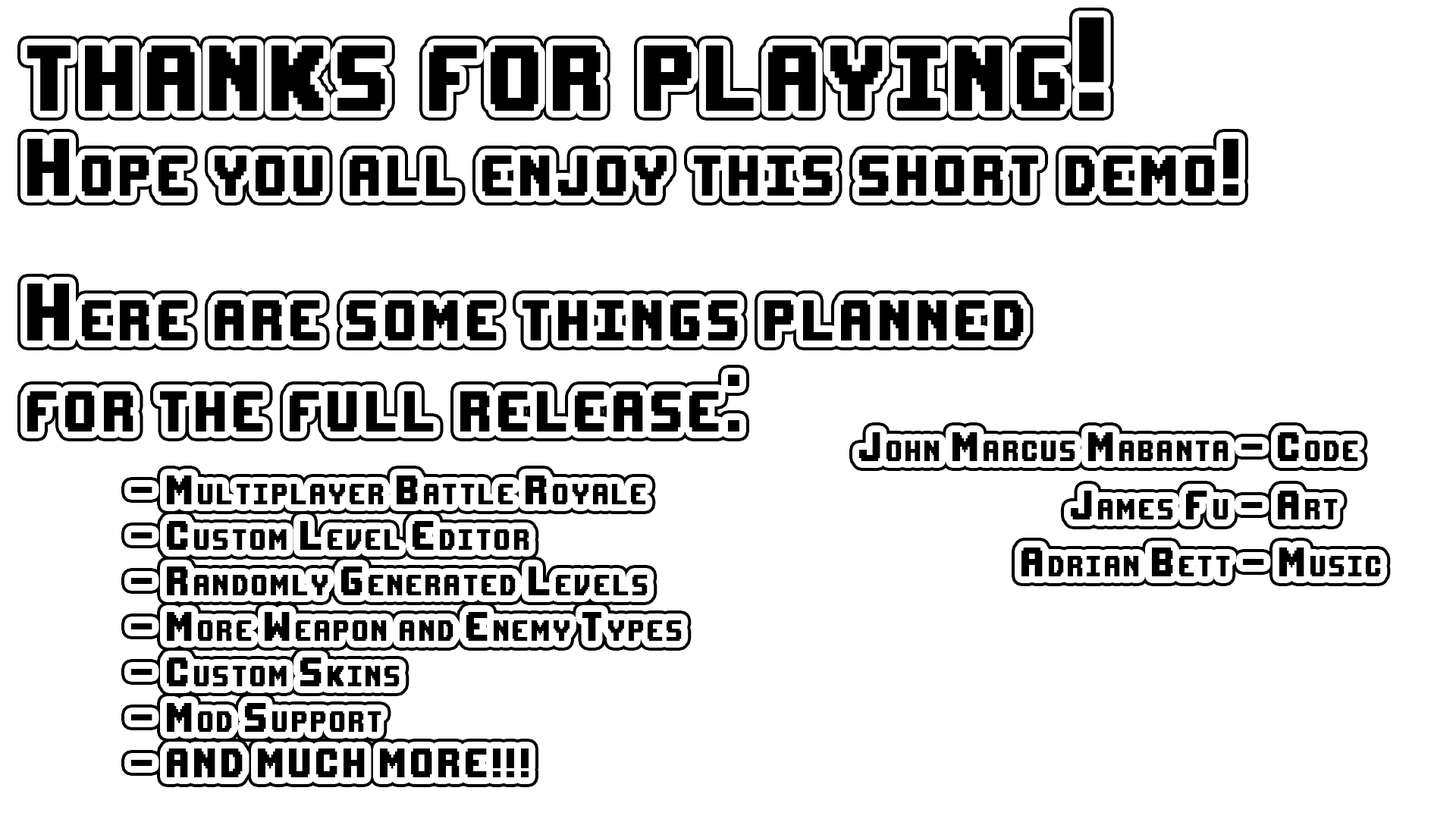
<style>
.page{position:relative;width:1456px;height:819px;background:#ffffff}
.page>*{position:absolute;margin:0}
.t1{font:184.8px "UpheavalTT-BRK-";letter-spacing:0.12em;color:#000000;font-variant:small-caps;scale:0.67 1}
.t2{font:113.7px/144.8px "UpheavalTT-BRK-";letter-spacing:0.12em;color:#000000;font-variant:small-caps;scale:0.67 1}
.t3{font:113.7px "UpheavalTT-BRK-";letter-spacing:0.12em;color:#000000;font-variant:small-caps;scale:0.67 1}
.t4{font:56.9px "UpheavalTT-BRK-";letter-spacing:0.12em;color:#000000;font-variant:small-caps;scale:0.67 1}
</style>
<div class="page">
<p class="t1" style="left:27px;top:17px;width:1077px;height:94px">thanks for playing!</p>
<p class="t2" style="left:27px;top:139px;width:1211px;height:292px;text-align:justify">Hope you all enjoy this short demo! <br>Here are some things planned<br><span class="t3">for the full release:</span></p>
<p class="t4" style="left:859px;top:432px;width:499px;height:29px">John Marcus Mabanta - Code</p>
<p class="t4" style="left:131px;top:475px;width:551px;height:302px;text-align:justify">- Multiplayer Battle Royale<br>- Custom Level Editor<br>- Randomly Generated Levels<br>- More Weapon and Enemy Types<br>- Custom Skins<br>- Mod Support<br>- AND MUCH MORE!!!</p>
<p class="t4" style="left:1071px;top:491px;width:267px;height:28px">James Fu - Art</p>
<p class="t4" style="left:1021px;top:548px;width:360px;height:28px">Adrian Bett - Music</p>
</div>
